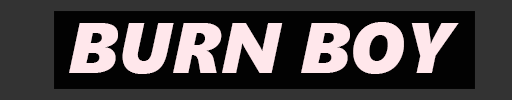
<style>
.page{position:relative;width:512px;height:100px;background:#020202}
.page>*{position:absolute;margin:0}
.t1{font:72px "SegoeUIBlack-Italic";color:#ffe7eb}
</style>
<div class="page">
<p class="t1" style="left:69px;top:22px;width:390px;height:52px">BURN BOY</p>
</div>
